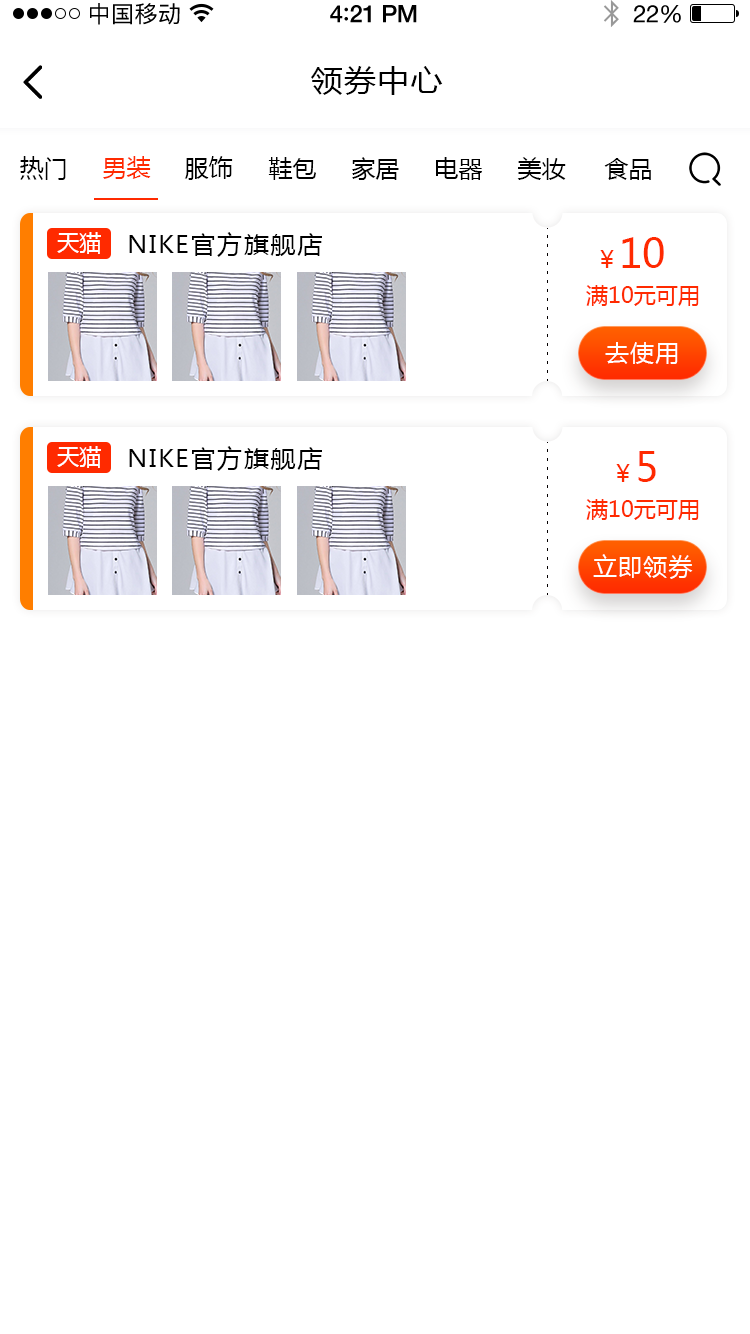
<style>
.page{position:relative;width:750px;height:1334px;background:#ffffff}
.page>*{position:absolute;margin:0}
.t1{font:23px "PingFangSC-Regular";letter-spacing:0.02em;color:#000000}
.t2{font:24px "HelveticaNeue-Medium";letter-spacing:-0.02em;color:#000000}
.t3{font:26px "Avenir-Medium";letter-spacing:-0.02em;color:#000000}
.t4{font:24px "HelveticaNeue";letter-spacing:-0.02em;color:#000000}
.t5{font:30px "MicrosoftYaHei";letter-spacing:0.05em;color:#000000;scale:1.06 1}
.t6{font:24px "MicrosoftYaHei";color:#000000;text-transform:uppercase}
.t7{font:24px "MicrosoftYaHei";color:#ff2a00;text-transform:uppercase}
.t8{font:22px "MicrosoftYaHei";color:#ffffff;text-transform:uppercase}
.t9{font:24px "MicrosoftYaHei";letter-spacing:0.05em;color:#000000;scale:1.06 1}
.t10{font:40px "MicrosoftYaHei";color:#ff2a00;text-transform:uppercase}
.t11{font:22px "MicrosoftYaHei";color:#ff2a00;text-transform:uppercase}
.t12{font:24px "MicrosoftYaHei";letter-spacing:0.05em;color:#ffffff;text-transform:uppercase}
</style>
<div class="page">
<p class="t1" style="left:90px;top:3px;width:90px;height:22px">中国移动</p>
<p class="t2" style="left:330px;top:5px;width:87px;height:18px">4<span class="t3">:</span>21 PM</p>
<p class="t4" style="left:633px;top:5px;width:48px;height:18px">22%</p>
<p class="t5" style="left:311px;top:66px;width:132px;height:29px">领券中心</p>
<p class="t6" style="left:20px;top:156px;width:46px;height:24px">热门</p>
<p class="t7" style="left:103px;top:156px;width:48px;height:23px">男装</p>
<p class="t6" style="left:184px;top:156px;width:49px;height:24px">服饰</p>
<p class="t6" style="left:268px;top:157px;width:48px;height:23px">鞋包</p>
<p class="t6" style="left:352px;top:157px;width:47px;height:23px">家居</p>
<p class="t6" style="left:436px;top:157px;width:46px;height:23px">电器</p>
<p class="t6" style="left:517px;top:157px;width:49px;height:23px">美妆</p>
<p class="t6" style="left:604px;top:158px;width:47px;height:22px">食品</p>
<p class="t8" style="left:57px;top:232px;width:44px;height:22px">天猫</p>
<p class="t9" style="left:129px;top:232px;width:193px;height:25px">NIKE官方旗舰店</p>
<p class="t10" style="left:600px;top:237px;width:64px;height:31px"><span class="t7">￥</span>10</p>
<p class="t11" style="left:586px;top:285px;width:113px;height:21px">满10元可用</p>
<p class="t12" style="left:605px;top:342px;width:73px;height:22px">去使用</p>
<p class="t8" style="left:57px;top:446px;width:44px;height:22px">天猫</p>
<p class="t9" style="left:129px;top:446px;width:193px;height:25px">NIKE官方旗舰店</p>
<p class="t7" style="left:616px;top:451px;width:40px;height:31px">￥<span class="t10">5</span></p>
<p class="t11" style="left:586px;top:499px;width:113px;height:21px">满10元可用</p>
<p class="t12" style="left:593px;top:554px;width:100px;height:25px">立即领券</p>
</div>
